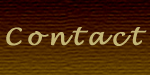
<style>
.page{position:relative;width:150px;height:75px}
.page>*{position:absolute;margin:0}
.t1{font:24px "LucidaHandwriting-Italic";letter-spacing:0.18em;color:#c2b475;font-weight:bold}
</style>
<div class="page">
<p class="t1" style="left:6px;top:27px;width:141px;height:19px">Contact</p>
</div>
